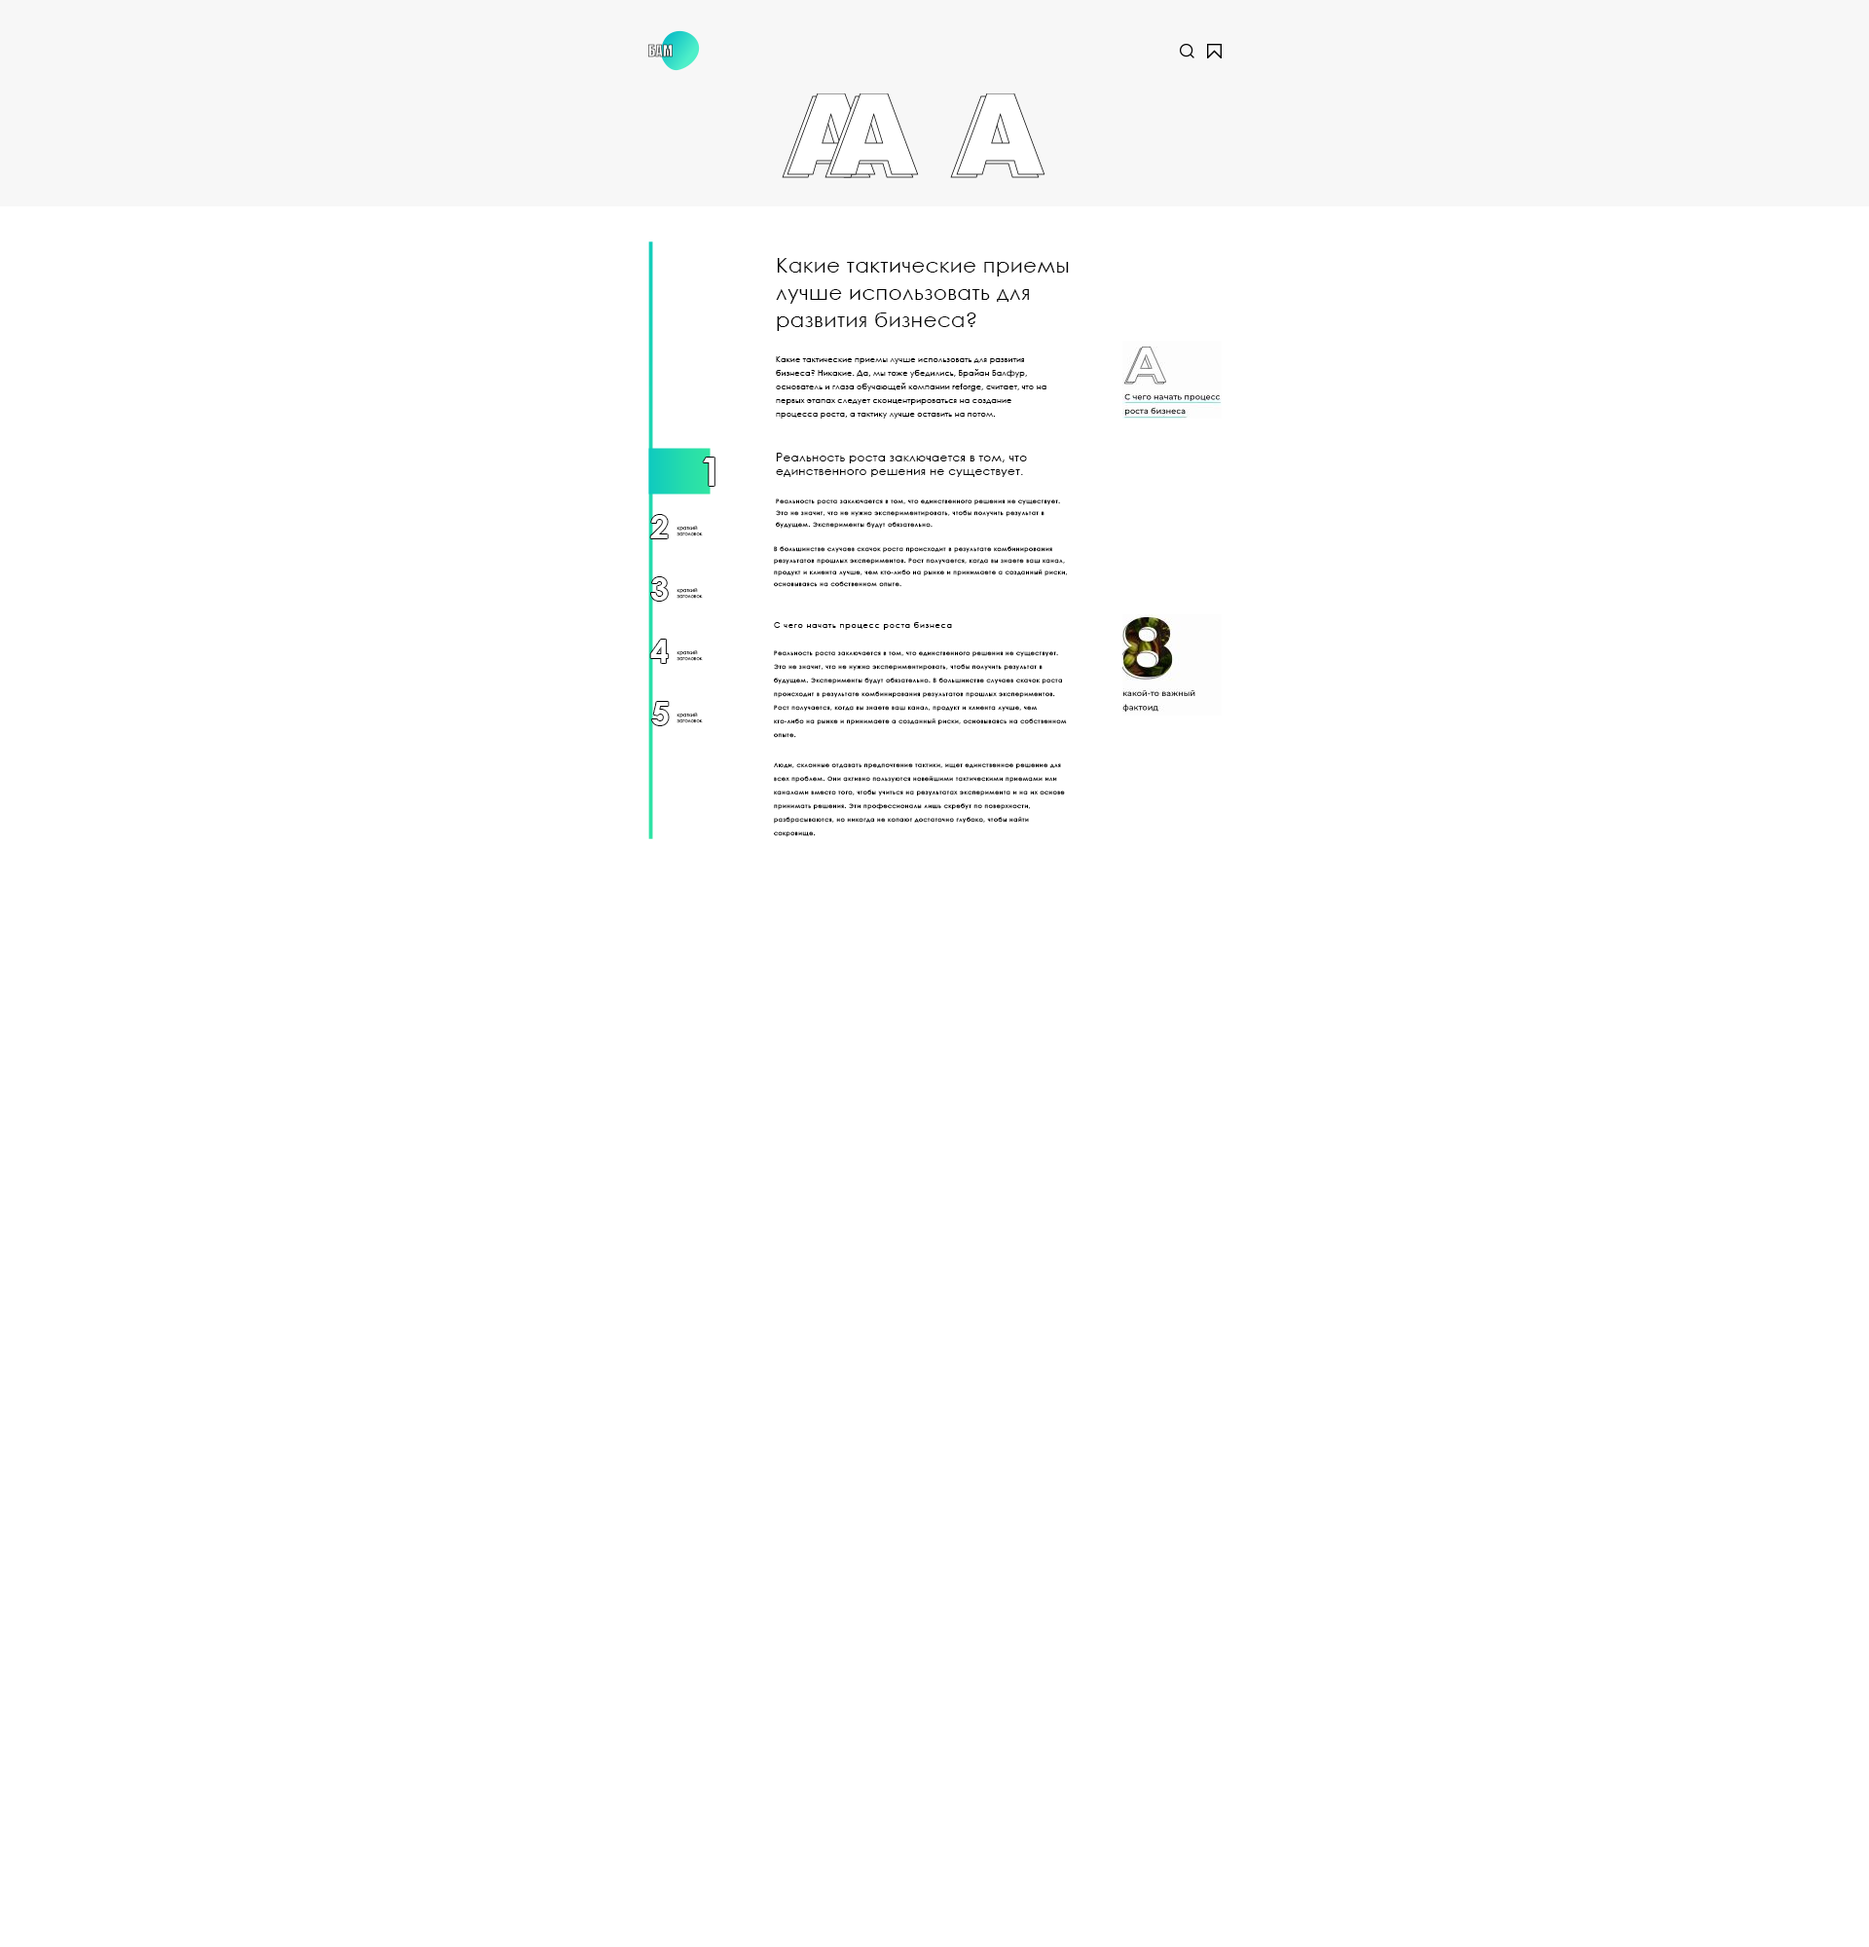
<style>
.page{position:relative;width:1869px;height:1947px;background:#ffffff}
.page>*{position:absolute;margin:0}
.t1{font:20.4px/27.3px "CenturyGothic";letter-spacing:0.025em;color:#000000}
.t2{font:7.8px/13.6px "CenturyGothic";letter-spacing:0.025em;color:#000000}
.t3{font:38.9px "CenturyGothic-Bold";letter-spacing:0.025em;color:#ffffff}
.t4{font:11.7px/13.6px "CenturyGothic";letter-spacing:0.025em;color:#000000}
.t5{font:5.8px/11.7px "CenturyGothic";letter-spacing:0.1em;color:#000000}
.t6{font:33.1px "CenturyGothic-Bold";letter-spacing:0.025em;color:#ffffff}
.t7{font:4.9px "CenturyGothic";letter-spacing:0.025em;color:#000000}
.t8{font:7.8px "CenturyGothic";letter-spacing:0.1em;color:#000000}
.t9{font:5.8px/13.6px "CenturyGothic";letter-spacing:0.1em;color:#000000}
</style>
<div class="page">
<p class="t1" style="left:776px;top:258px;width:293px;height:73px">Какие тактические приемы лучше использовать для развития бизнеса?</p>
<p class="t2" style="left:776px;top:356px;width:270px;height:63px">Какие тактические приемы лучше использовать для развития бизнеса? Никакие. Да, мы тоже убедились, Брайан Балфур, основатель и глаза обучающей компании reforge, считает, что на первых этапах следует сконцентрироваться на создание процесса роста, а тактику лучше оставить на потом.</p>
<p class="t3" style="left:703px;top:457px;width:11px;height:29px">1</p>
<p class="t4" style="left:776px;top:453px;width:251px;height:24px">Реальность роста заключается в том, что единственного решения не существует.</p>
<p class="t5" style="left:776px;top:498px;width:284px;height:31px">Реальность роста заключается в том, что единственного решения не существует. Это не значит, что не нужно экспериментировать, чтобы получить результат в будущем. Эксперименты будут обязательно.</p>
<p class="t6" style="left:650px;top:515px;width:18px;height:23px">2</p>
<p class="t7" style="left:676px;top:526px;width:27px;height:10px">краткий заголовок</p>
<p class="t5" style="left:774px;top:546px;width:294px;height:41px">В большинстве случаев скачок роста происходит в результате комбинирования результатов прошлых экспериментов. Рост получается, когда вы знаете ваш канал, продукт и клиента лучше, чем кто-либо на рынке и принимаете а созданный риски, основываясь на собственном опыте.</p>
<p class="t6" style="left:651px;top:577px;width:17px;height:24px">3#</p>
<p class="t7" style="left:676px;top:588px;width:27px;height:11px">краткий заголовок</p>
<p class="t8" style="left:774px;top:622px;width:178px;height:8px">С чего начать процесс роста бизнеса</p>
<p class="t6" style="left:650px;top:639px;width:19px;height:24px">4#</p>
<p class="t7" style="left:676px;top:650px;width:27px;height:11px">краткий заголовок</p>
<p class="t9" style="left:774px;top:650px;width:293px;height:88px">Реальность роста заключается в том, что единственного решения не существует. Это не значит, что не нужно экспериментировать, чтобы получить результат в будущем. Эксперименты будут обязательно. В большинстве случаев скачок роста происходит в результате комбинирования результатов прошлых экспериментов. Рост получается, когда вы знаете ваш канал, продукт и клиента лучше, чем кто-либо на рынке и принимаете а созданный риски, основываясь на собственном опыте.</p>
<p class="t6" style="left:651px;top:702px;width:18px;height:23px">5#</p>
<p class="t7" style="left:676px;top:713px;width:27px;height:10px">краткий заголовок</p>
<p class="t9" style="left:774px;top:762px;width:291px;height:75px">Люди, склонные отдавать предпочтение тактики, ищет единственное решение для всех проблем. Они активно пользуются новейшими тактическими приемами или каналами вместо того, чтобы учиться на результатах эксперимента и на их основе принимать решения. Эти профессионалы лишь скребут по поверхности, разбрасываются, но никогда не копают достаточно глубоко, чтобы найти сокровище.</p>
</div>
